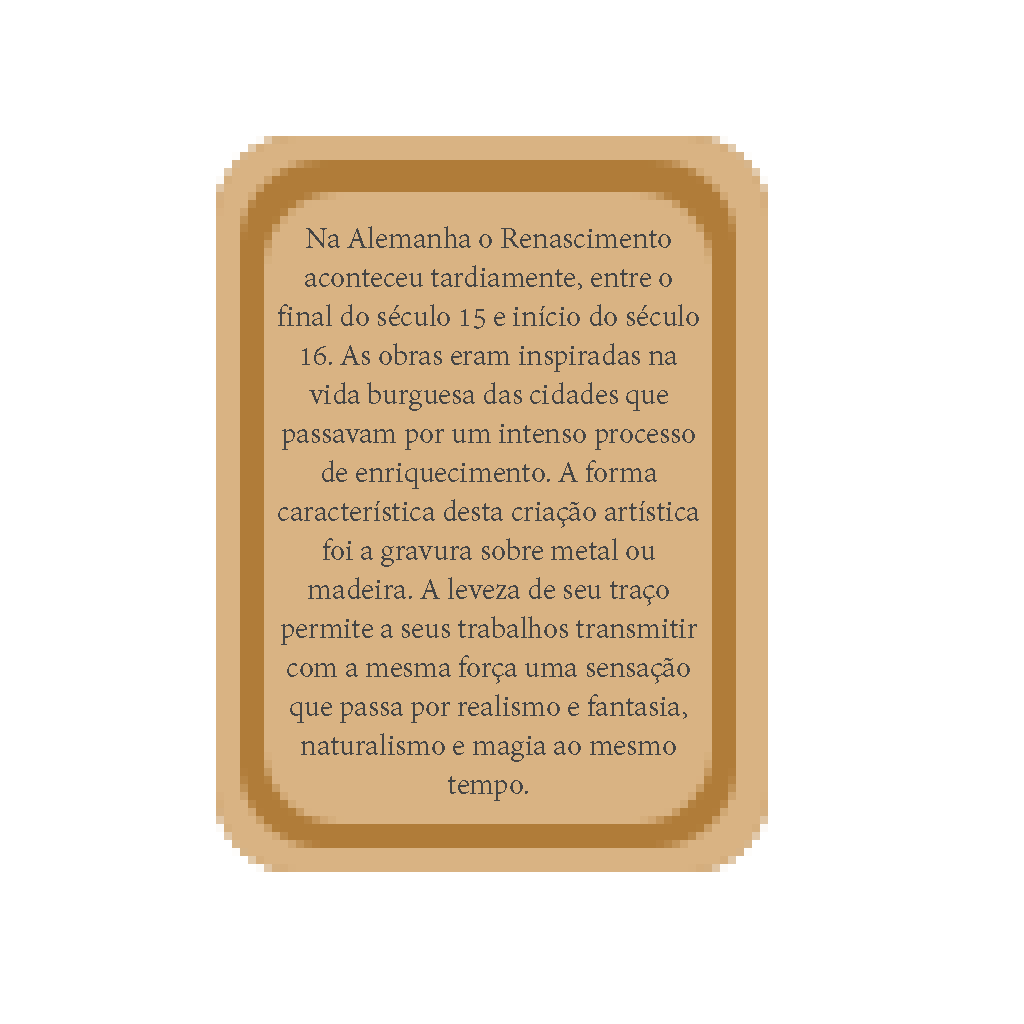
<style>
.page{position:relative;width:1024px;height:1024px;background:#ffffff}
.page>*{position:absolute;margin:0}
.t1{font:32.5px "AdobeDevanagari-Regular";color:#454545}
</style>
<div class="page">
<p class="t1" style="left:278px;top:226px;width:421px;height:575px;text-align:center">Na Alemanha o Renascimento aconteceu tardiamente, entre o final do século 15 e início do século 16. As obras eram inspiradas na vida burguesa das cidades que passavam por um intenso processo de enriquecimento. A forma característica desta criação artística foi a gravura sobre metal ou madeira. A leveza de seu traço permite a seus trabalhos transmitir com a mesma força uma sensação que passa por realismo e fantasia, naturalismo e magia ao mesmo tempo.</p>
</div>
